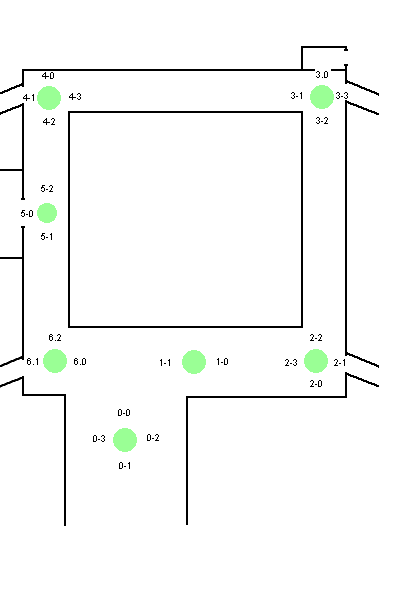
<style>
.page{position:relative;width:400px;height:600px;background:#ffffff}
.page>*{position:absolute;margin:0}
.t1{font:9px "ArialMT";color:#000000}
</style>
<div class="page">
<p class="t1" style="left:42px;top:72px;width:12px;height:7px">4-0</p>
<p class="t1" style="left:316px;top:71px;width:12px;height:7px">3.0</p>
<p class="t1" style="left:23px;top:94px;width:11px;height:7px">4-1</p>
<p class="t1" style="left:69px;top:93px;width:12px;height:7px">4-3</p>
<p class="t1" style="left:291px;top:92px;width:11px;height:7px">3-1</p>
<p class="t1" style="left:336px;top:92px;width:12px;height:7px">3-3</p>
<p class="t1" style="left:43px;top:118px;width:12px;height:7px">4-2</p>
<p class="t1" style="left:316px;top:117px;width:12px;height:7px">3-2</p>
<p class="t1" style="left:41px;top:185px;width:12px;height:7px">5-2</p>
<p class="t1" style="left:21px;top:210px;width:12px;height:7px">5-0</p>
<p class="t1" style="left:41px;top:233px;width:11px;height:7px">5-1</p>
<p class="t1" style="left:49px;top:334px;width:12px;height:7px">6.2</p>
<p class="t1" style="left:310px;top:334px;width:12px;height:7px">2-2</p>
<p class="t1" style="left:27px;top:358px;width:11px;height:7px">6.1</p>
<p class="t1" style="left:74px;top:358px;width:12px;height:7px">6.0</p>
<p class="t1" style="left:160px;top:359px;width:10px;height:7px">1-1</p>
<p class="t1" style="left:217px;top:358px;width:11px;height:7px">1-0</p>
<p class="t1" style="left:285px;top:359px;width:12px;height:7px">2-3</p>
<p class="t1" style="left:334px;top:359px;width:11px;height:7px">2-1</p>
<p class="t1" style="left:310px;top:380px;width:12px;height:7px">2-0</p>
<p class="t1" style="left:118px;top:409px;width:12px;height:7px">0-0</p>
<p class="t1" style="left:93px;top:435px;width:12px;height:7px">0-3</p>
<p class="t1" style="left:147px;top:434px;width:12px;height:7px">0-2</p>
<p class="t1" style="left:119px;top:462px;width:11px;height:7px">0-1</p>
</div>
